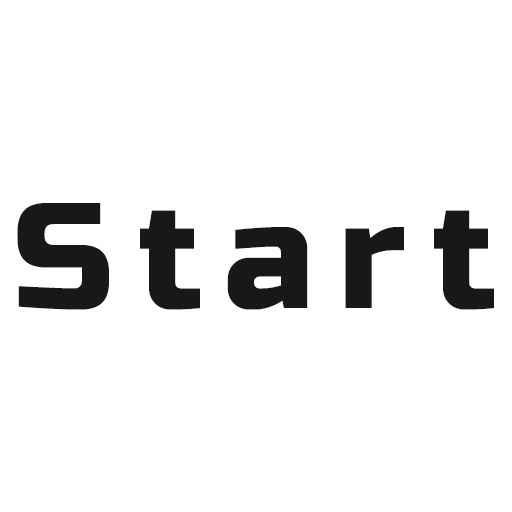
<style>
.page{position:relative;width:512px;height:512px;background:#ffffff}
.page>*{position:absolute;margin:0}
.t1{font:150px "RussoOne-Regular";letter-spacing:0.16em;color:#181818}
</style>
<div class="page">
<p class="t1" style="left:17px;top:203px;width:477px;height:107px">Start</p>
</div>
